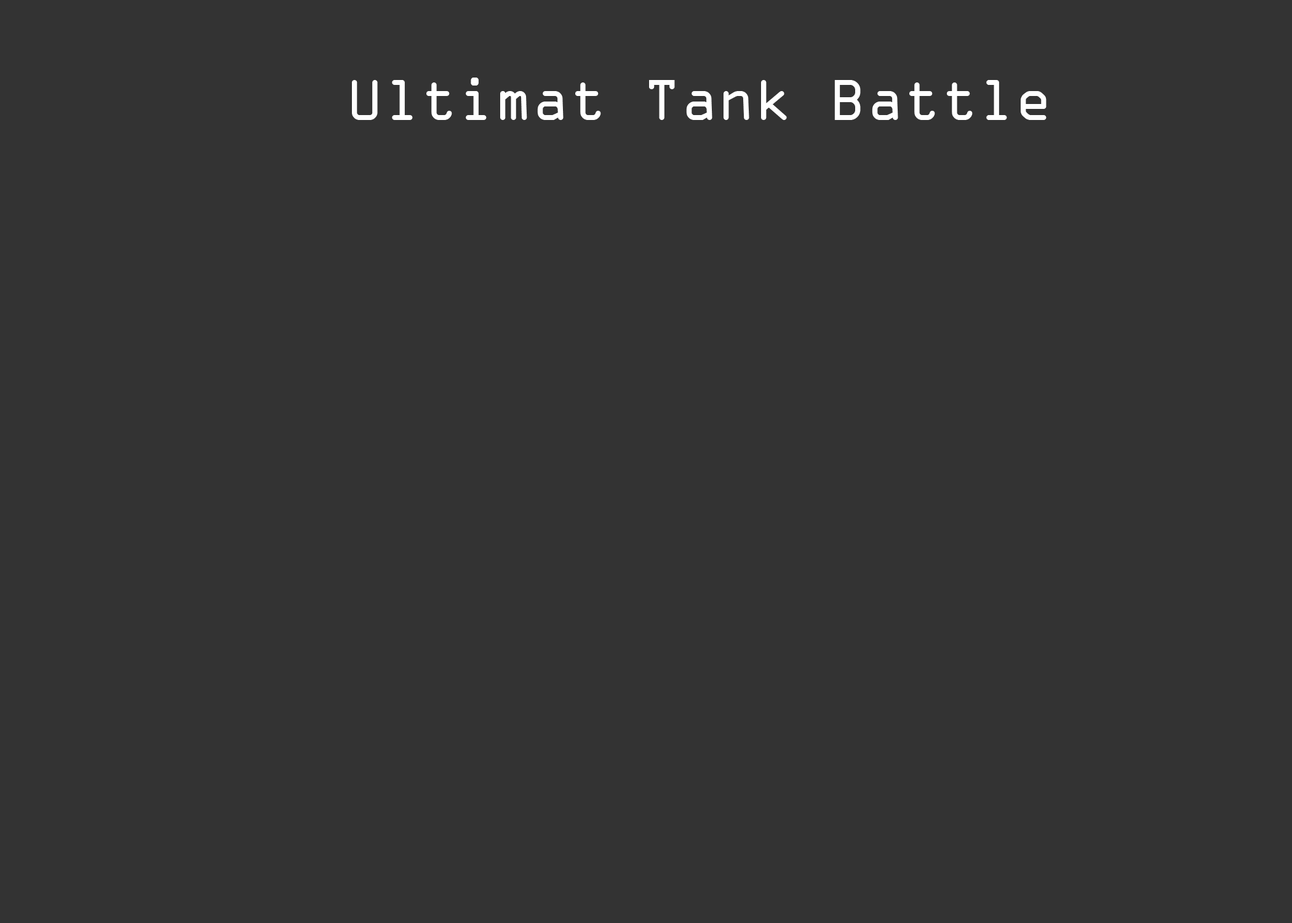
<style>
.page{position:relative;width:1292px;height:923px;background:#333333}
.page>*{position:absolute;margin:0}
.t1{font:61.5px "OCRAExtended";color:#ffffff}
</style>
<div class="page">
<p class="t1" style="left:352px;top:78px;width:695px;height:42px">Ultimat Tank Battle</p>
</div>
